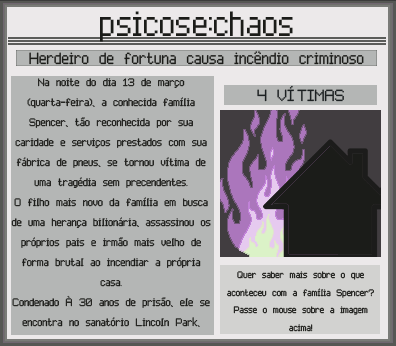
<style>
.page{position:relative;width:396px;height:346px;background:#b4b6b5}
.page>*{position:absolute;margin:0}
.t1{font:54.2px "Advanced_Pixel-7";color:#1b1c19}
.t2{font:25px "Advanced_Pixel-7";color:#1b1c19}
.t3{font:16.7px "Advanced_Pixel-7";color:#1b1c19}
.t4{font:25px "Advanced_Pixel-7";color:#1c2022}
.t5{font:14.6px "Advanced_Pixel-7"}
</style>
<div class="page">
<p class="t1" style="left:100px;top:11px;width:193px;height:31px">psicose:chaos</p>
<p class="t2" style="left:29px;top:51px;width:335px;height:14px">Herdeiro de fortuna causa incêndio criminoso</p>
<p class="t3" style="left:11px;top:78px;width:200px;height:249px;text-align:center">Na noite do dia 13 de março (quarta-feira), a conhecida família Spencer, tão reconhecida por sua caridade e serviços prestados com sua fábrica de pneus, se tornou vítima de uma tragédia sem precendentes. <br>O filho mais novo da família em busca de uma herança bilionária, assassinou os próprios pais e irmão mais velho de forma brutal ao incendiar a própria casa. <br>Condenado À 30 anos de prisão, ele se encontra no sanatório Lincoln Park,</p>
<p class="t4" style="left:257px;top:85px;width:87px;height:17px">4 VÍTIMAS</p>
<p class="t5" style="left:227px;top:271px;width:147px;height:61px;text-align:center">Quer saber mais sobre o que aconteceu com a família Spencer? Passe o mouse sobre a imagem acima!</p>
</div>
